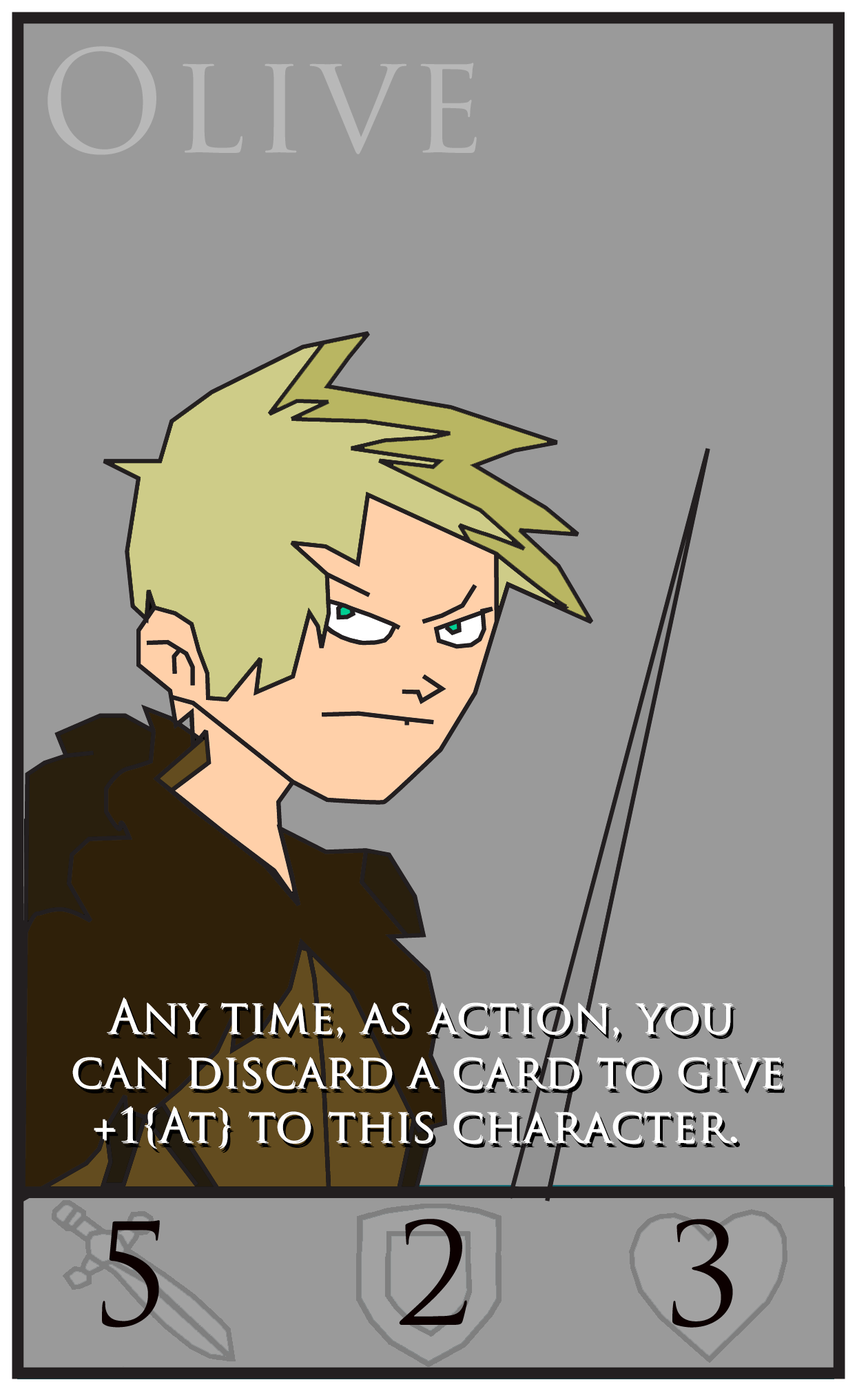
<style>
.page{position:relative;width:857px;height:1391px;background:#9a9a9a}
.page>*{position:absolute;margin:0}
.t1{font:45.9px "TrajanPro-Regular";color:#ffffff}
.t2{font:51.7px "TrajanPro-Regular";color:#0c535b}
</style>
<div class="page">
<p class="t1" style="left:107px;top:997px;width:625px;height:41px">Any time, as action, you</p>
<p class="t1" style="left:108px;top:998px;width:626px;height:41px">Any time, as action, you</p>
<p class="t1" style="left:72px;top:1057px;width:709px;height:31px">can discard a card to give</p>
<p class="t1" style="left:74px;top:1058px;width:709px;height:31px">can discard a card to give</p>
<p class="t1" style="left:94px;top:1106px;width:642px;height:42px"><span class="t2"> </span>+1{At} to this character.</p>
<p class="t1" style="left:95px;top:1107px;width:642px;height:42px"><span class="t2"> </span>+1{At} to this character.</p>
</div>
